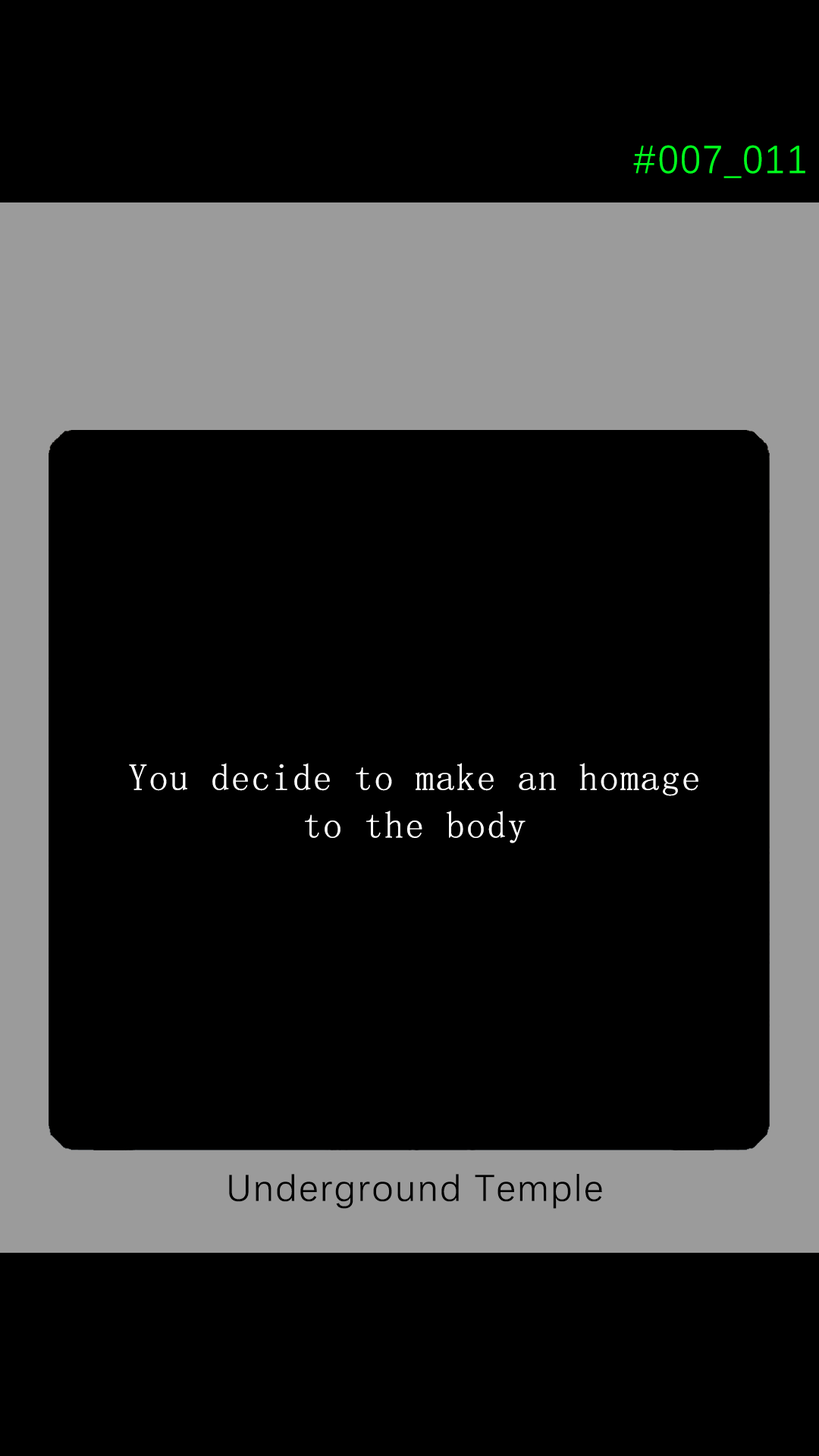
<style>
.page{position:relative;width:819px;height:1456px;background:#000000}
.page>*{position:absolute;margin:0}
.t1{font:39.2px "DengXian-Regular";letter-spacing:0.04em;color:#00ff1e}
.t2{font:37.9px/47.6px "SimSun";letter-spacing:0.04em;color:#ffffff}
.t3{font:37.9px "DengXian-Regular";letter-spacing:0.04em;color:#000000}
</style>
<div class="page">
<p class="t1" style="left:633px;top:145px;width:172px;height:33px">#007_011</p>
<p class="t2" style="left:129px;top:763px;width:569px;height:80px;text-align:center">You decide to make an homage<br>to the body</p>
<p class="t3" style="left:229px;top:1174px;width:373px;height:35px">Underground Temple</p>
</div>
